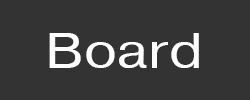
<style>
.page{position:relative;width:250px;height:100px;background:#333333}
.page>*{position:absolute;margin:0}
.t1{font:48px "Helvetica";color:#ffffff;scale:1.2 1}
</style>
<div class="page">
<p class="t1" style="left:49px;top:33px;width:150px;height:35px">Board</p>
</div>
